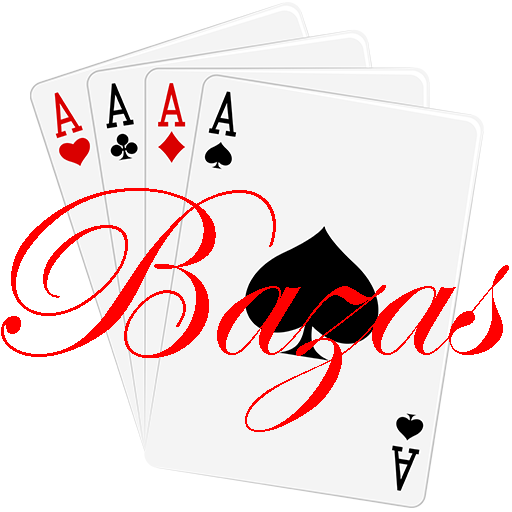
<style>
.page{position:relative;width:512px;height:512px;background:#f4f4f4}
.page>*{position:absolute;margin:0}
.t1{font:249px "EdwardianScriptITC";color:#ff0000}
</style>
<div class="page">
<p class="t1" style="left:1px;top:188px;width:508px;height:244px">Bazas</p>
</div>
